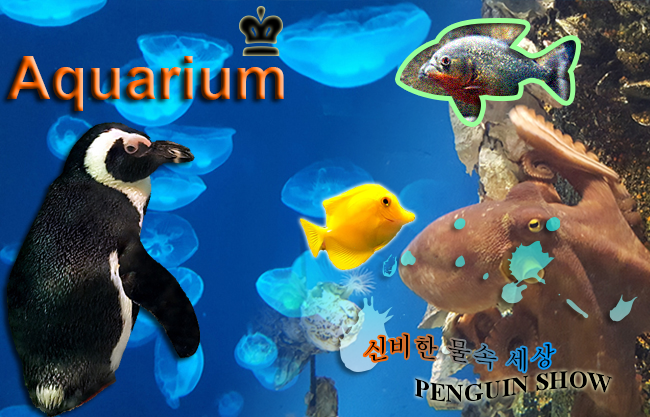
<style>
.page{position:relative;width:650px;height:417px}
.page>*{position:absolute;margin:0}
.t1{font:59.9px "Arial-BoldMT"}
.t2{font:25px "Batang";color:#000000}
.t3{font:25px "TimesNewRomanPS-BoldMT";color:#000000}
</style>
<div class="page">
<p class="t1" style="left:7px;top:56px;width:277px;height:55px">Aquarium</p>
<p class="t2" style="left:364px;top:334px;width:191px;height:38px">신비한 물속 세상</p>
<p class="t3" style="left:415px;top:371px;width:198px;height:31px">PENGUIN SHOW</p>
</div>
